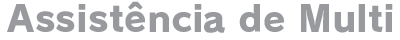
<style>
.page{position:relative;width:400px;height:40px;background:#ffffff}
.page>*{position:absolute;margin:0}
.t1{font:36px "RodinPro-EB";letter-spacing:0.003em;color:#989a9d}
</style>
<div class="page">
<p class="t1" style="left:7px;top:1px;width:386px;height:32px">Assistência de Multi</p>
</div>
